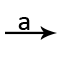
<style>
.page{position:relative;width:60px;height:60px;background:#ffffff}
.page>*{position:absolute;margin:0}
.t1{font:29px "Calibri";color:#000000}
</style>
<div class="page">
<p class="t1" style="left:18px;top:17px;width:12px;height:13px">a</p>
</div>
